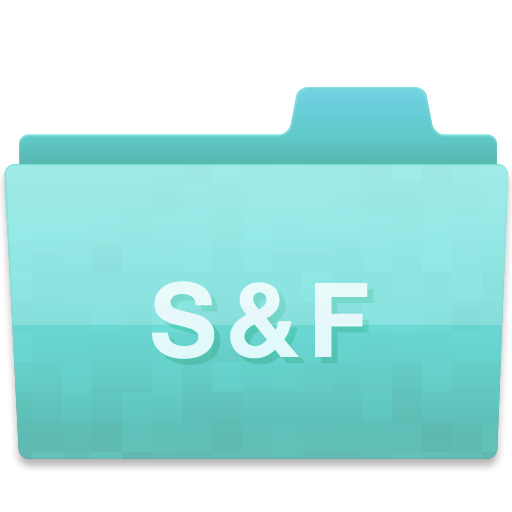
<style>
.page{position:relative;width:512px;height:512px;background:#ffffff}
.page>*{position:absolute;margin:0}
.t1{font:103.3px "HelveticaNeue-Bold";letter-spacing:0.1em;color:#d8fdf7}
</style>
<div class="page">
<p class="t1" style="left:152px;top:281px;width:216px;height:78px">S&amp;F</p>
</div>
